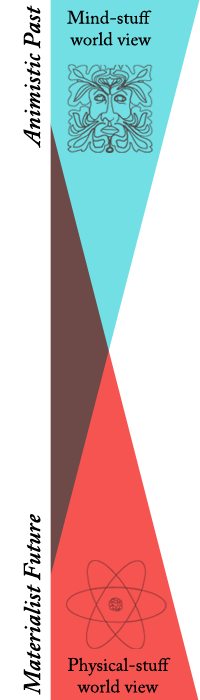
<style>
.page{position:relative;width:200px;height:700px;background:#ffffff}
.page>*{position:absolute;margin:0}
.t1{font:24px "ACaslonPro-SemiboldItalic";letter-spacing:0.01em;color:#000000}
.t2{font:18px "ACaslonPro-Regular";letter-spacing:0.01em;color:#000000}
</style>
<div class="page">
<p class="t1" style="left:23px;top:5px;width:18px;height:143px;rotate:-90deg">Animistic Past</p>
<p class="t2" style="left:67px;top:10px;width:85px;height:36px;text-align:center">Mind-stuff <br>world view</p>
<p class="t1" style="left:23px;top:514px;width:18px;height:181px;rotate:-90deg">Materialist Future</p>
<p class="t2" style="left:68px;top:657px;width:103px;height:36px;text-align:center">Physical-stuff<br>world view</p>
</div>
